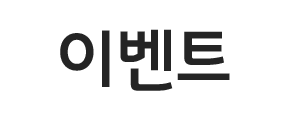
<style>
.page{position:relative;width:294px;height:121px;background:#ffffff}
.page>*{position:absolute;margin:0}
.t1{font:70.8px "GyeonggiTitleM";color:#242424;scale:0.95 1}
</style>
<div class="page">
<p class="t1" style="left:60px;top:29px;width:170px;height:62px">이벤트</p>
</div>
